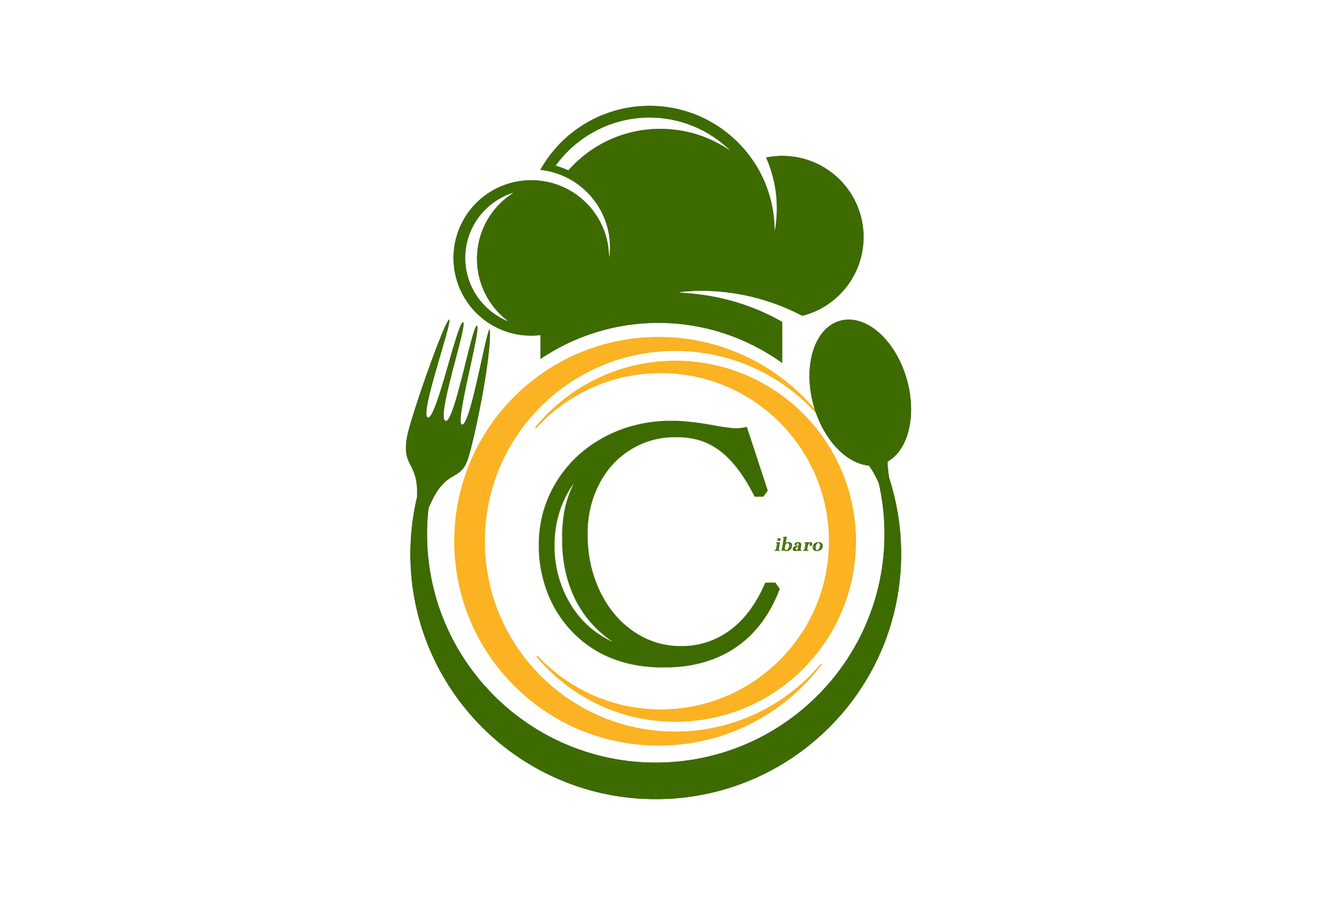
<style>
.page{position:relative;width:1317px;height:905px;background:#ffffff}
.page>*{position:absolute;margin:0}
.t1{font:343px "AcademyEngravedLetPlain";letter-spacing:0.035em;color:#3d6b00;font-weight:bold}
.t2{font:20.6px "AcademyEngravedLetPlain";letter-spacing:0.035em;color:#3d6b00;font-weight:bold;font-style:italic}
</style>
<div class="page">
<p class="t1" style="left:538px;top:420px;width:242px;height:248px">C</p>
<p class="t2" style="left:774px;top:536px;width:49px;height:15px">ibaro</p>
</div>
